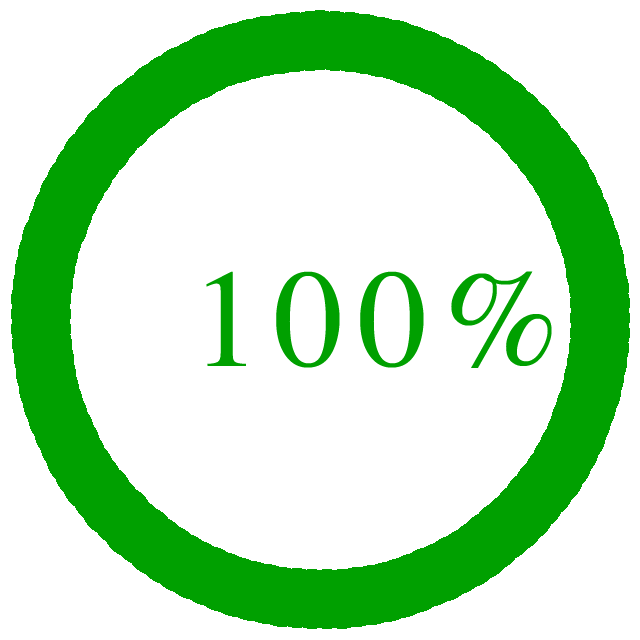
<style>
.page{position:relative;width:640px;height:640px;background:#ffffff}
.page>*{position:absolute;margin:0}
.t1{font:140px "Times-Roman";letter-spacing:0.1em;color:#00a000;text-transform:uppercase}
</style>
<div class="page">
<p class="t1" style="left:206px;top:271px;width:346px;height:97px">100%</p>
</div>
